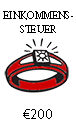
<style>
.page{position:relative;width:76px;height:124px;background:#ffffff}
.page>*{position:absolute;margin:0}
.t1{font:12px "AdobeDevanagari-Regular";color:#000000;scale:0.9 1}
.t2{font:14px "MyriadPro-Regular";color:#000000}
</style>
<div class="page">
<p class="t1" style="left:3px;top:11px;width:70px;height:22px;text-align:center">EINKOMMENS-<br>STEUER</p>
<p class="t2" style="left:23px;top:109px;width:29px;height:10px">€200</p>
</div>
